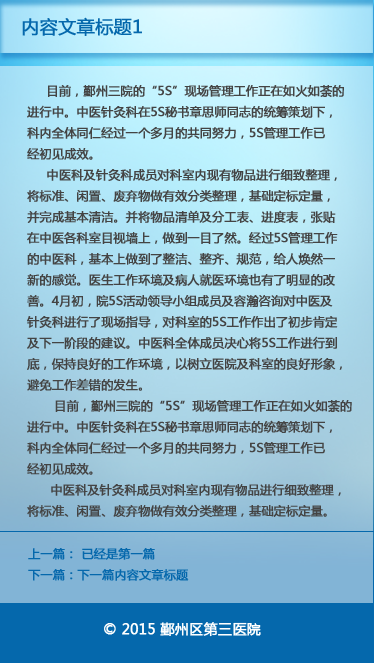
<style>
.page{position:relative;width:374px;height:663px}
.page>*{position:absolute;margin:0}
.t1{font:18px "MicrosoftYaHei";color:#0568ac;font-weight:bold}
.t2{font:12px "MicrosoftYaHei";color:#444444;font-weight:bold}
.t3{font:12px "MicrosoftYaHei";color:#0568ac;font-weight:bold}
.t4{font:14px "MicrosoftYaHei";color:#ffffff;font-weight:bold}
</style>
<div class="page">
<p class="t1" style="left:22px;top:17px;width:120px;height:19px">内容文章标题1</p>
<p class="t2" style="left:27px;top:85px;width:325px;height:432px">目前，鄞州三院的“5S”现场管理工作正在如火如荼的<br>进行中。中医针灸科在5S秘书章思师同志的统筹策划下，<br>科内全体同仁经过一个多月的共同努力，5S管理工作已<br>经初见成效。<br>     中医科及针灸科成员对科室内现有物品进行细致整理，<br>将标准、闲置、废弃物做有效分类整理，基础定标定量，<br>并完成基本清洁。并将物品清单及分工表、进度表，张贴<br>在中医各科室目视墙上，做到一目了然。经过5S管理工作<br>的中医科，基本上做到了整洁、整齐、规范，给人焕然一<br>新的感觉。医生工作环境及病人就医环境也有了明显的改<br>善。4月初，院5S活动领导小组成员及容瀚咨询对中医及<br>针灸科进行了现场指导，对科室的5S工作作出了初步肯定<br>及下一阶段的建议。中医科全体成员决心将5S工作进行到<br>底，保持良好的工作环境，以树立医院及科室的良好形象，<br>避免工作差错的发生。<br>       目前，鄞州三院的“5S”现场管理工作正在如火如荼的<br>进行中。中医针灸科在5S秘书章思师同志的统筹策划下，<br>科内全体同仁经过一个多月的共同努力，5S管理工作已<br>经初见成效。<br>      中医科及针灸科成员对科室内现有物品进行细致整理，<br>将标准、闲置、废弃物做有效分类整理，基础定标定量。</p>
<p class="t3" style="left:28px;top:548px;width:161px;height:33px">上一篇： 已经是第一篇<br>下一篇：下一篇内容文章标题</p>
<p class="t4" style="left:104px;top:622px;width:157px;height:15px">© 2015 鄞州区第三医院</p>
</div>
